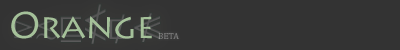
<style>
.page{position:relative;width:400px;height:50px;background:#333333}
.page>*{position:absolute;margin:0}
.t1{font:35px "LithosPro-Regular";letter-spacing:-0.005em;color:#a9c69d}
.t2{font:37px "LithosPro-Regular";letter-spacing:-0.025em;color:#a9c69d}
.t3{font:9px "CambriaMath";letter-spacing:-0.005em}
</style>
<div class="page">
<p class="t1" style="left:11px;top:11px;width:141px;height:28px;opacity:0.96"><span class="t2">O</span>range</p>
<p class="t3" style="left:158px;top:33px;width:21px;height:6px">BETA</p>
</div>
